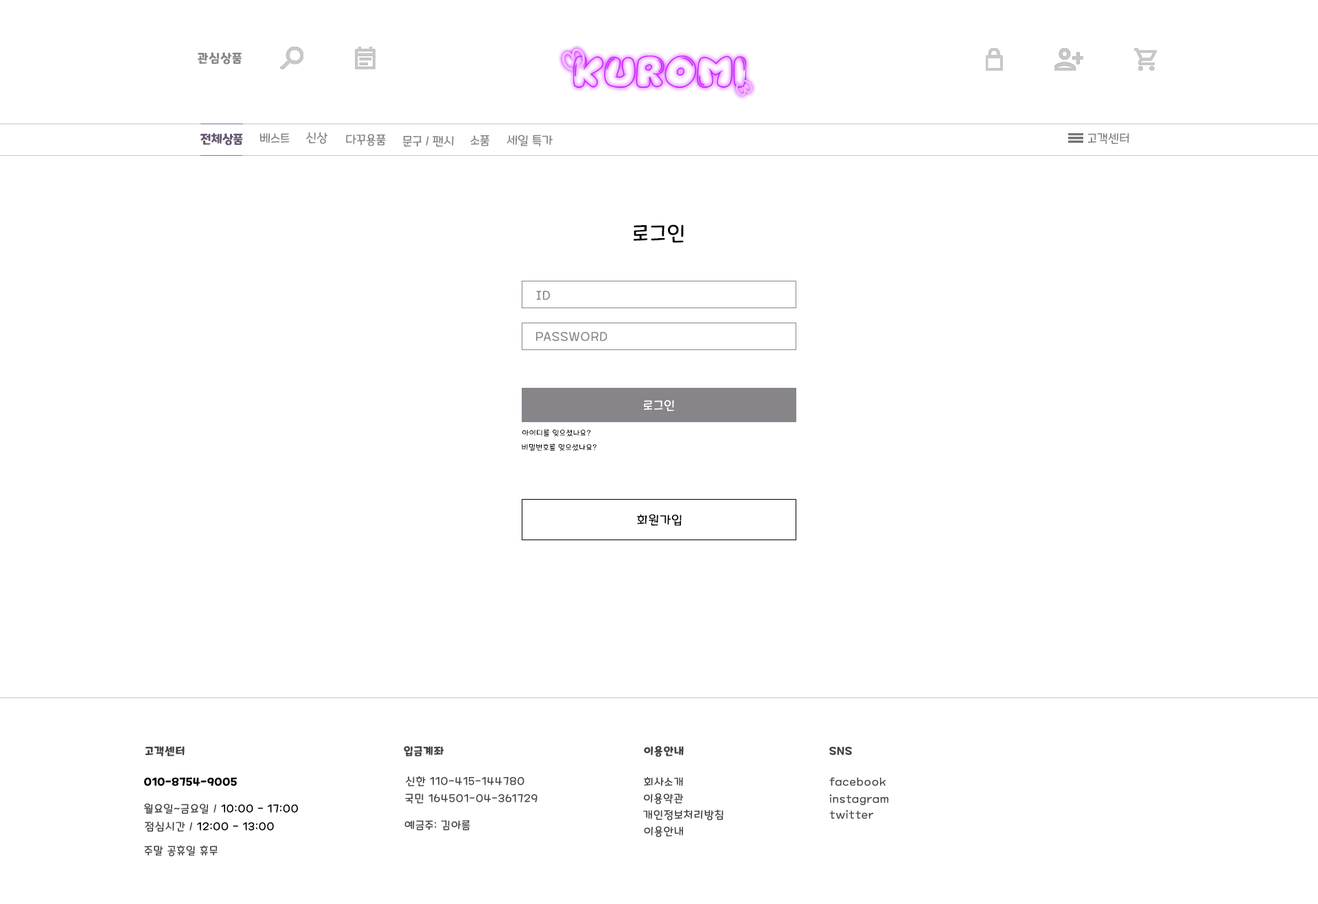
<style>
.page{position:relative;width:1318px;height:904px;background:#ffffff}
.page>*{position:absolute;margin:0}
.t1{font:12.4px "MaplestoryBold";letter-spacing:0.06em;color:#878589}
.t2{font:12.4px "MaplestoryBold";color:#645772}
.t3{font:12.4px "MaplestoryLight";color:#878589}
.t4{font:20.6px "MaplestoryLight";letter-spacing:0.06em;color:#000000}
.t5{font:12.4px "MaplestoryLight";letter-spacing:0.06em;color:#878589}
.t6{font:12.4px "MaplestoryLight";letter-spacing:0.06em;color:#ffffff}
.t7{font:7.6px "MaplestoryLight";letter-spacing:0.06em;color:#000000}
.t8{font:12.4px "MaplestoryLight";letter-spacing:0.06em;color:#000000}
.t9{font:11px "MaplestoryBold";letter-spacing:0.06em;color:#464348}
.t10{font:11px "MaplestoryBold";letter-spacing:0.06em;color:#000000}
.t11{font:11px "MaplestoryLight";letter-spacing:0.06em;color:#464348}
.t12{font:11px "MaplestoryLight";letter-spacing:0.06em;color:#000000}
</style>
<div class="page">
<p class="t1" style="left:198px;top:52px;width:44px;height:13px">관심상품</p>
<p class="t2" style="left:201px;top:133px;width:42px;height:13px">전체상품</p>
<p class="t3" style="left:260px;top:133px;width:30px;height:11px">베스트</p>
<p class="t3" style="left:306px;top:132px;width:22px;height:12px">신상</p>
<p class="t3" style="left:346px;top:134px;width:40px;height:12px">다꾸용품</p>
<p class="t3" style="left:403px;top:136px;width:51px;height:11px">문구 / 팬시</p>
<p class="t3" style="left:470px;top:135px;width:20px;height:11px">소품</p>
<p class="t3" style="left:507px;top:135px;width:46px;height:11px">세일 특가</p>
<p class="t3" style="left:1088px;top:133px;width:42px;height:11px">고객센터</p>
<p class="t4" style="left:634px;top:225px;width:50px;height:18px">로그인</p>
<p class="t5" style="left:536px;top:290px;width:15px;height:10px">ID</p>
<p class="t5" style="left:536px;top:332px;width:72px;height:9px">PASSWORD</p>
<p class="t6" style="left:644px;top:400px;width:30px;height:11px">로그인</p>
<p class="t7" style="left:522px;top:429px;width:69px;height:8px">아이디를 잊으셨나요?</p>
<p class="t7" style="left:522px;top:444px;width:75px;height:7px">비밀번호를 잊으셨나요?</p>
<p class="t8" style="left:637px;top:514px;width:45px;height:12px">회원가입</p>
<p class="t9" style="left:145px;top:746px;width:40px;height:11px">고객센터</p>
<p class="t9" style="left:404px;top:746px;width:40px;height:11px">입금계좌</p>
<p class="t9" style="left:644px;top:746px;width:40px;height:11px">이용안내</p>
<p class="t9" style="left:830px;top:747px;width:22px;height:8px">SNS</p>
<p class="t10" style="left:144px;top:777px;width:93px;height:9px">010-8754-9005</p>
<p class="t11" style="left:406px;top:776px;width:119px;height:11px">신한 110-415-144780</p>
<p class="t11" style="left:644px;top:777px;width:39px;height:9px">회사소개</p>
<p class="t11" style="left:830px;top:777px;width:57px;height:9px">facebook</p>
<p class="t11" style="left:405px;top:794px;width:133px;height:10px">국민 164501-04-361729</p>
<p class="t11" style="left:644px;top:793px;width:40px;height:12px">이용약관</p>
<p class="t11" style="left:830px;top:795px;width:59px;height:11px">instagram</p>
<p class="t12" style="left:144px;top:803px;width:154px;height:11px"><span class="t11">월요일~금요일 / </span>10:00 - 17:00</p>
<p class="t11" style="left:643px;top:810px;width:81px;height:11px">개인정보처리방침</p>
<p class="t12" style="left:145px;top:822px;width:129px;height:10px"><span class="t11">점심시간 / </span>12:00 - 13:00</p>
<p class="t11" style="left:404px;top:821px;width:66px;height:10px">예금주: 김아름</p>
<p class="t11" style="left:830px;top:810px;width:44px;height:9px">twitter</p>
<p class="t11" style="left:644px;top:826px;width:39px;height:12px">이용안내</p>
<p class="t11" style="left:144px;top:845px;width:74px;height:12px">주말 공휴일 휴무</p>
</div>
